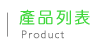
<style>
.page{position:relative;width:100px;height:50px;background:#ffffff}
.page>*{position:absolute;margin:0}
.t1{font:16px "DFYuan-Lt-HK-BF";letter-spacing:0.12em;color:#3ed73a;font-weight:bold}
.t2{font:11px "Humanist521BT-Light";letter-spacing:0.12em;color:#707070;font-weight:bold}
</style>
<div class="page">
<p class="t1" style="left:19px;top:9px;width:71px;height:16px">產品列表</p>
<p class="t2" style="left:22px;top:30px;width:42px;height:9px">Product</p>
</div>
